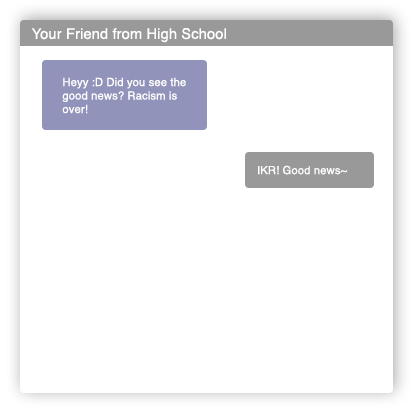
<style>
.page{position:relative;width:413px;height:413px;background:#ffffff}
.page>*{position:absolute;margin:0}
.t1{font:14.6px "Helvetica";letter-spacing:0.01em;color:#ffffff}
.t2{font:11.2px "Helvetica";letter-spacing:0.01em;color:#ffffff}
</style>
<div class="page">
<p class="t1" style="left:31px;top:28px;width:195px;height:15px">Your Friend from High School</p>
<p class="t2" style="left:62px;top:77px;width:124px;height:37px">Heyy :D Did you see the<br>good news? Racism is<br>over!</p>
<p class="t2" style="left:258px;top:165px;width:90px;height:10px">IKR! Good news~</p>
</div>
